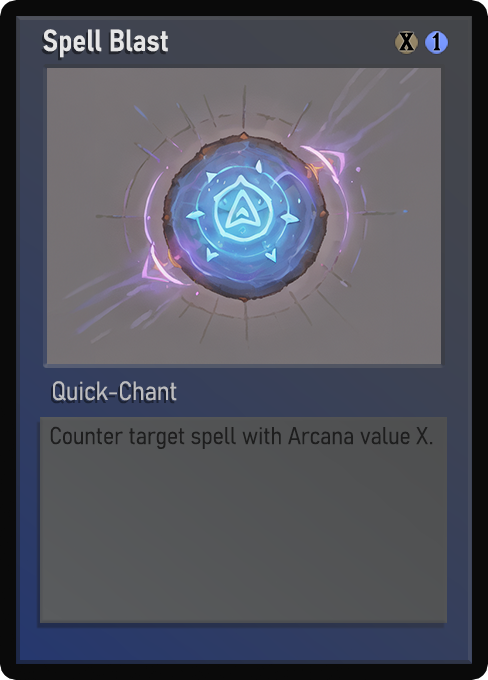
<style>
.page{position:relative;width:488px;height:680px}
.page>*{position:absolute;margin:0}
.t1{font:30px "Bahnschrift-SemiBoldSemiCondensed";color:#f2f2f2;font-weight:bold}
.t2{font:25px "WTRRoycroft";color:#000000;font-weight:bold;scale:1.09 1}
.t3{font:26px "Bahnschrift-LightSemiCondensed";color:#c8c8c8;font-weight:bold}
.t4{font:24px "Bahnschrift-LightSemiCondensed";color:#1e1e1e;font-weight:bold}
</style>
<div class="page">
<p class="t1" style="left:43px;top:29px;width:125px;height:29px;opacity:0.9">Spell Blast</p>
<p class="t2" style="left:399px;top:32px;width:15px;height:19px">X</p>
<p class="t2" style="left:432px;top:32px;width:9px;height:19px">1</p>
<p class="t3" style="left:53px;top:381px;width:124px;height:20px;opacity:0.9">Quick-Chant</p>
<p class="t4" style="left:50px;top:426px;width:383px;height:23px">Counter target spell with Arcana value X.</p>
</div>
